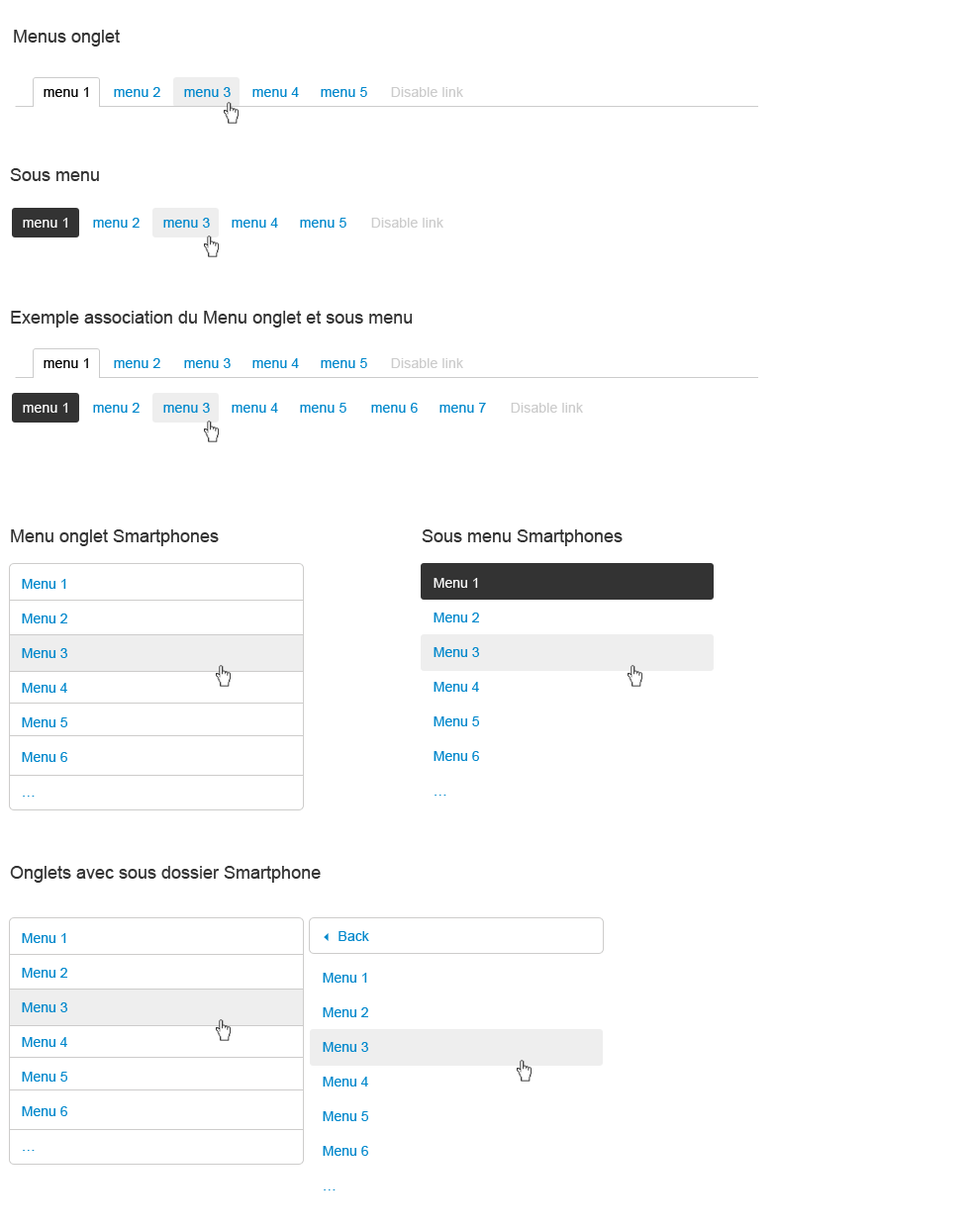
<style>
.page{position:relative;width:970px;height:1229px;background:#ffffff}
.page>*{position:absolute;margin:0}
.t1{font:17.8px "ArialMT";color:#333333}
.t2{font:13.9px "ArialMT";letter-spacing:0.01em;color:#000000}
.t3{font:13.9px "ArialMT";letter-spacing:0.01em;color:#0188cc}
.t4{font:13.9px "ArialMT";letter-spacing:0.01em;color:#cccccc}
.t5{font:13.9px "ArialMT";letter-spacing:0.01em;color:#ffffff}
.t6{font:13.9px/24.7px "ArialMT";color:#0188cc}
.t7{font:13.9px/24.7px "ArialMT";color:#ffffff}
.t8{font:13.9px "ArialMT";color:#0188cc}
.t9{font:13.9px "Webdings";color:#0188cc}
</style>
<div class="page">
<p class="t1" style="left:14px;top:30px;width:106px;height:17px">Menus onglet</p>
<p class="t2" style="left:44px;top:87px;width:44px;height:10px">menu 1</p>
<p class="t3" style="left:114px;top:87px;width:46px;height:10px">menu 2</p>
<p class="t3" style="left:184px;top:87px;width:47px;height:10px">menu 3</p>
<p class="t3" style="left:252px;top:87px;width:47px;height:10px">menu 4</p>
<p class="t3" style="left:321px;top:87px;width:46px;height:10px">menu 5</p>
<p class="t4" style="left:391px;top:87px;width:72px;height:10px">Disable link</p>
<p class="t1" style="left:10px;top:168px;width:89px;height:13px">Sous menu</p>
<p class="t5" style="left:23px;top:218px;width:44px;height:10px">menu 1</p>
<p class="t3" style="left:93px;top:218px;width:47px;height:10px">menu 2</p>
<p class="t3" style="left:163px;top:218px;width:47px;height:10px">menu 3</p>
<p class="t3" style="left:232px;top:218px;width:46px;height:10px">menu 4</p>
<p class="t3" style="left:300px;top:218px;width:46px;height:10px">menu 5</p>
<p class="t4" style="left:371px;top:218px;width:72px;height:10px">Disable link</p>
<p class="t1" style="left:11px;top:311px;width:402px;height:17px">Exemple association du Menu onglet et sous menu</p>
<p class="t2" style="left:44px;top:358px;width:44px;height:10px">menu 1</p>
<p class="t3" style="left:114px;top:358px;width:46px;height:10px">menu 2</p>
<p class="t3" style="left:184px;top:358px;width:47px;height:10px">menu 3</p>
<p class="t3" style="left:252px;top:358px;width:47px;height:10px">menu 4</p>
<p class="t3" style="left:321px;top:358px;width:46px;height:10px">menu 5</p>
<p class="t4" style="left:391px;top:358px;width:72px;height:10px">Disable link</p>
<p class="t5" style="left:23px;top:403px;width:44px;height:10px">menu 1</p>
<p class="t3" style="left:93px;top:403px;width:47px;height:10px">menu 2</p>
<p class="t3" style="left:163px;top:403px;width:47px;height:10px">menu 3</p>
<p class="t3" style="left:232px;top:403px;width:46px;height:10px">menu 4</p>
<p class="t3" style="left:300px;top:403px;width:46px;height:10px">menu 5</p>
<p class="t3" style="left:371px;top:403px;width:47px;height:10px">menu 6</p>
<p class="t3" style="left:439px;top:403px;width:47px;height:10px">menu 7</p>
<p class="t4" style="left:511px;top:403px;width:72px;height:10px">Disable link</p>
<p class="t1" style="left:11px;top:530px;width:208px;height:16px">Menu onglet Smartphones</p>
<p class="t1" style="left:422px;top:530px;width:201px;height:16px">Sous menu Smartphones</p>
<p class="t6" style="left:22px;top:579px;width:45px;height:218px">Menu 1 <br>Menu 2<br>Menu 3 <br>Menu 4<br>Menu 5<br>Menu 6<br>…</p>
<p class="t6" style="left:434px;top:578px;width:45px;height:218px"><span class="t7">Menu 1 <br></span>Menu 2<br>Menu 3 <br>Menu 4<br>Menu 5<br>Menu 6<br>…</p>
<p class="t1" style="left:10px;top:866px;width:311px;height:17px">Onglets avec sous dossier Smartphone</p>
<p class="t6" style="left:22px;top:933px;width:45px;height:218px">Menu 1 <br>Menu 2<br>Menu 3 <br>Menu 4<br>Menu 5<br>Menu 6<br>…</p>
<p class="t8" style="left:324px;top:931px;width:45px;height:10px"><span class="t9">3</span> Back</p>
<p class="t6" style="left:323px;top:973px;width:45px;height:218px">Menu 1<br>Menu 2<br>Menu 3 <br>Menu 4<br>Menu 5<br>Menu 6<br>…</p>
</div>
